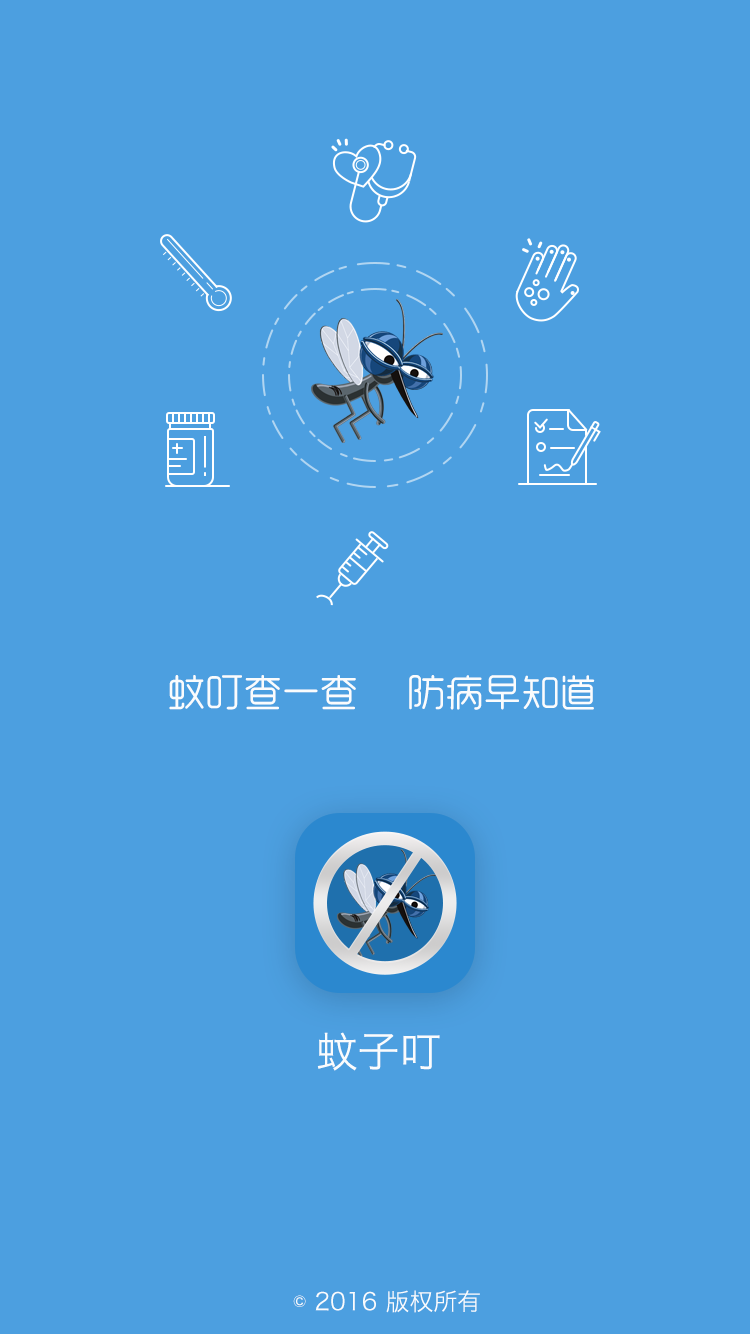
<style>
.page{position:relative;width:750px;height:1334px;background:#4c9fe0}
.page>*{position:absolute;margin:0}
.t1{font:38px "MFYueYuan_Noncommercial-Regular";color:#fafcfd;text-transform:uppercase}
.t2{font:42px "HiraginoSansGB-W3";color:#fafcfd;text-transform:uppercase}
.t3{font:24px "HiraginoSansGB-W3";color:#fafcfd;text-transform:uppercase}
</style>
<div class="page">
<p class="t1" style="left:169px;top:675px;width:426px;height:35px">蚊叮查一查     防病早知道</p>
<p class="t2" style="left:317px;top:1032px;width:123px;height:39px">蚊子叮</p>
<p class="t3" style="left:293px;top:1290px;width:187px;height:23px">© 2016 版权所有</p>
</div>
